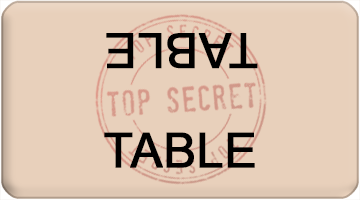
<style>
.page{position:relative;width:360px;height:200px;background:#e8d0bb}
.page>*{position:absolute;margin:0}
.t1{font:48px "ArialMT";color:#000000;font-weight:bold}
</style>
<div class="page">
<p class="t1" style="left:106px;top:33px;width:152px;height:36px;rotate:180deg">TABLE</p>
<p class="t1" style="left:104px;top:132px;width:151px;height:36px">TABLE</p>
</div>
